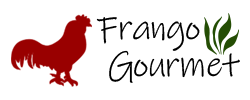
<style>
.page{position:relative;width:250px;height:100px;background:#ffffff}
.page>*{position:absolute;margin:0}
.t1{font:36px "InkFree";letter-spacing:-0.02em;color:#000000}
</style>
<div class="page">
<p class="t1" style="left:96px;top:17px;width:104px;height:34px">Frango</p>
<p class="t1" style="left:109px;top:50px;width:131px;height:33px">Gourmet</p>
</div>
